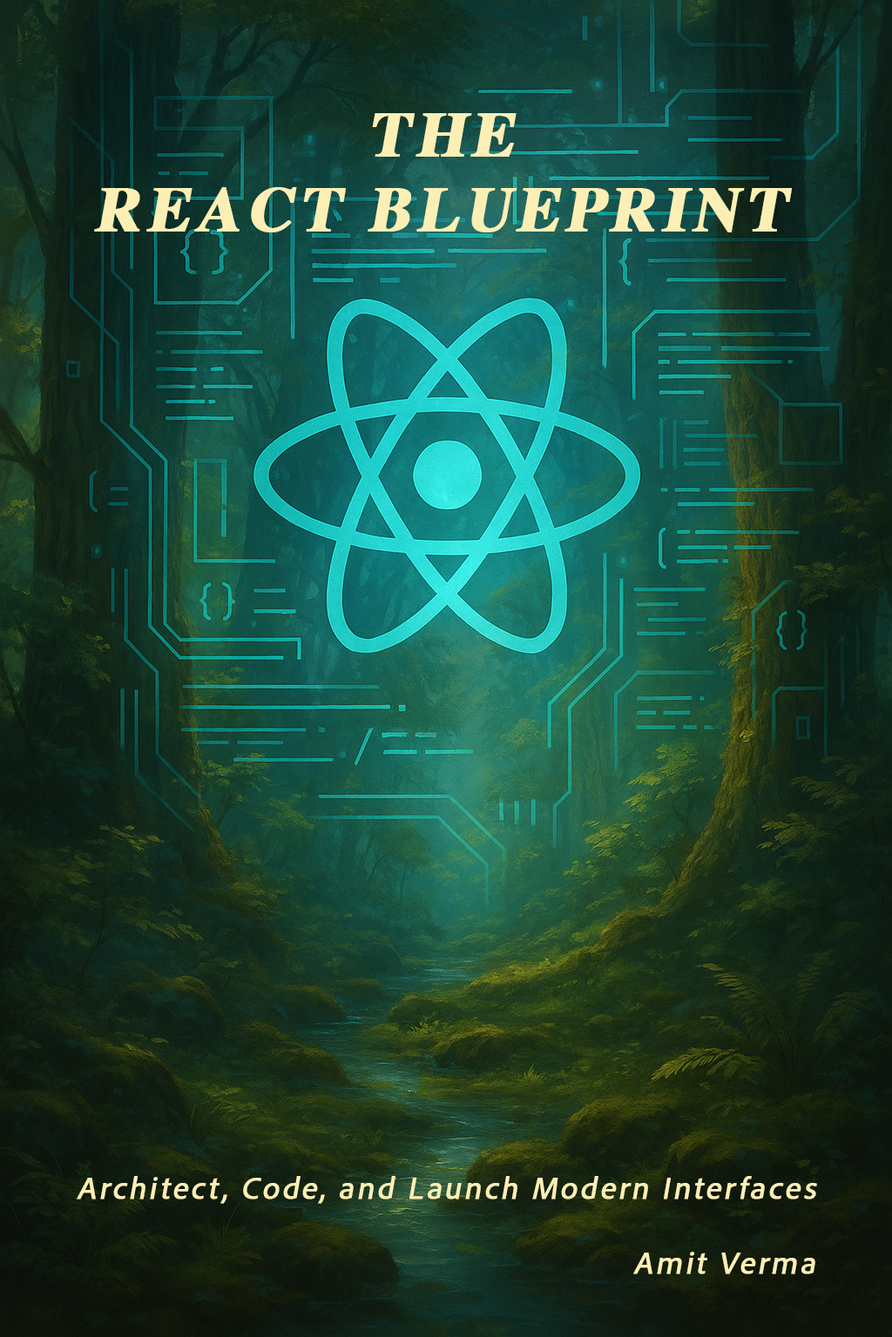
<style>
.page{position:relative;width:892px;height:1337px}
.page>*{position:absolute;margin:0}
.t1{font:62.7px "Times-Bold";letter-spacing:0.075em;color:#fcefb5;font-weight:bold;font-style:italic}
.t2{font:31.3px "AdobeClean-Regular";letter-spacing:0.075em;color:#fcefb5;font-weight:bold;font-style:italic}
</style>
<div class="page">
<p class="t1" style="left:94px;top:113px;width:697px;height:119px;text-align:center">THE<br>REACT BLUEPRINT</p>
<p class="t2" style="left:77px;top:1176px;width:740px;height:28px">Architect, Code, and Launch Modern Interfaces</p>
<p class="t2" style="left:633px;top:1252px;width:182px;height:23px">Amit Verma</p>
</div>
